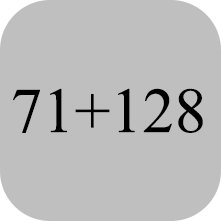
<style>
.page{position:relative;width:221px;height:221px;background:#bfbfbf}
.page>*{position:absolute;margin:0}
.t1{font:63.9px "TimesNewRomanPSMT";color:#000000}
</style>
<div class="page">
<p class="t1" style="left:13px;top:88px;width:190px;height:45px">71+128</p>
</div>
